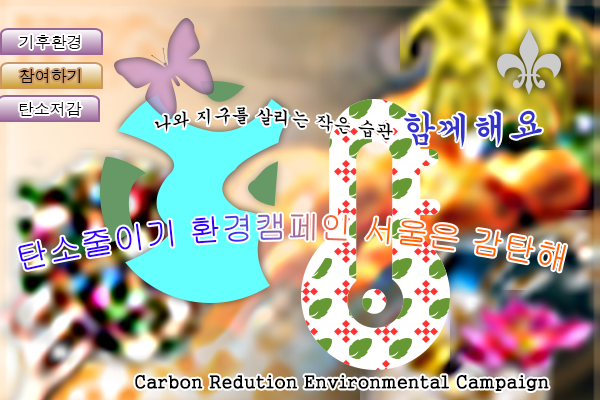
<style>
.page{position:relative;width:600px;height:400px}
.page>*{position:absolute;margin:0}
.t1{font:16px "Dotum";color:#000000}
.t2{font:18px "Gungsuh";color:#000000}
.t3{font:36px "Gungsuh";color:#3333cc}
</style>
<div class="page">
<p class="t1" style="left:19px;top:35px;width:61px;height:14px">기후환경</p>
<p class="t1" style="left:20px;top:69px;width:60px;height:14px">참여하기</p>
<p class="t1" style="left:19px;top:102px;width:63px;height:14px">탄소저감</p>
<p class="t2" style="left:154px;top:107px;width:388px;height:41px">나와 지구를 살리는 작은 습관 <span class="t3">함께해요</span></p>
<p class="t2" style="left:135px;top:375px;width:414px;height:16px">Carbon Redution Environmental Campaign</p>
</div>
